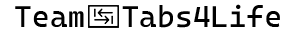
<style>
.page{position:relative;width:300px;height:32px;background:#ffffff}
.page>*{position:absolute;margin:0}
.t1{font:30px "CascadiaCode-Regular";letter-spacing:0.01em;color:#000000}
</style>
<div class="page">
<p class="t1" style="left:15px;top:4px;width:265px;height:24px">Team  Tabs4Life</p>
</div>
